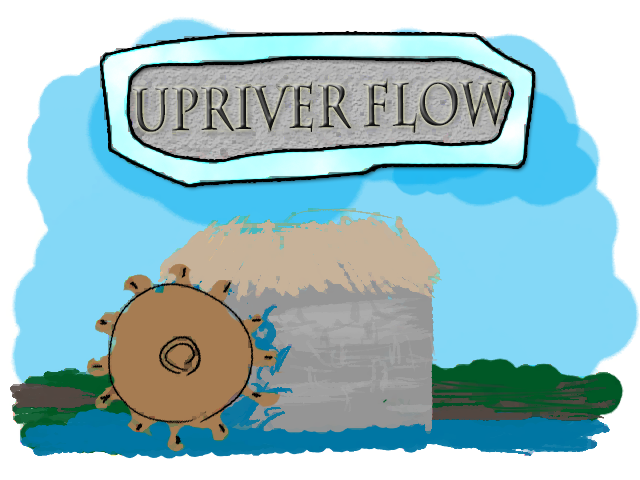
<style>
.page{position:relative;width:640px;height:480px;background:#ffffff}
.page>*{position:absolute;margin:0}
.t1{font:60.5px "CharlemagneStd-Bold";scale:0.75 1}
</style>
<div class="page">
<p class="t1" style="left:133px;top:78px;width:377px;height:55px;rotate:-1deg">upriver flow</p>
</div>
